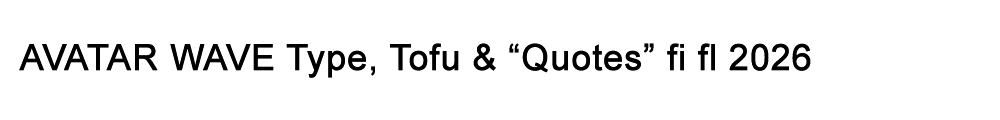
<style>
.page{position:relative;width:1000px;height:120px;background:#ffffff}
.page>*{position:absolute;margin:0}
.t1{font:36px "ArialMT";color:#000000;font-weight:bold}
</style>
<div class="page">
<p class="t1" style="left:19px;top:43px;width:792px;height:35px">AVATAR WAVE Type, Tofu &amp; “Quotes” fi fl 2026</p>
<p class="t1" style="left:19px;top:43px;width:792px;height:35px">AVATAR WAVE Type, Tofu &amp; “Quotes” fi fl 2026</p>
</div>
